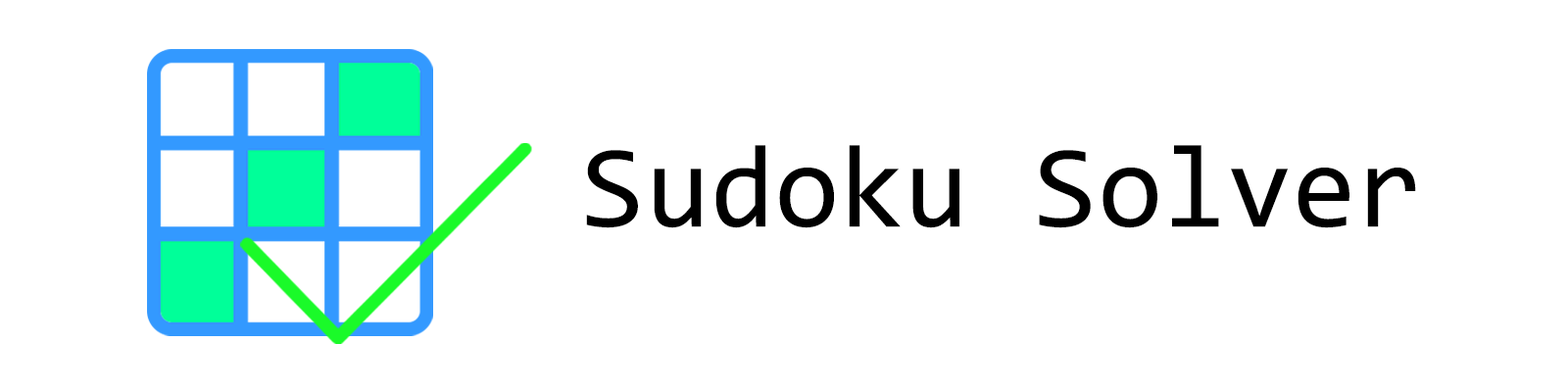
<style>
.page{position:relative;width:1568px;height:392px;background:#ffffff}
.page>*{position:absolute;margin:0}
.t1{font:117.6px "Consolas";color:#000000}
</style>
<div class="page">
<p class="t1" style="left:586px;top:145px;width:830px;height:83px">Sudoku Solver</p>
</div>
